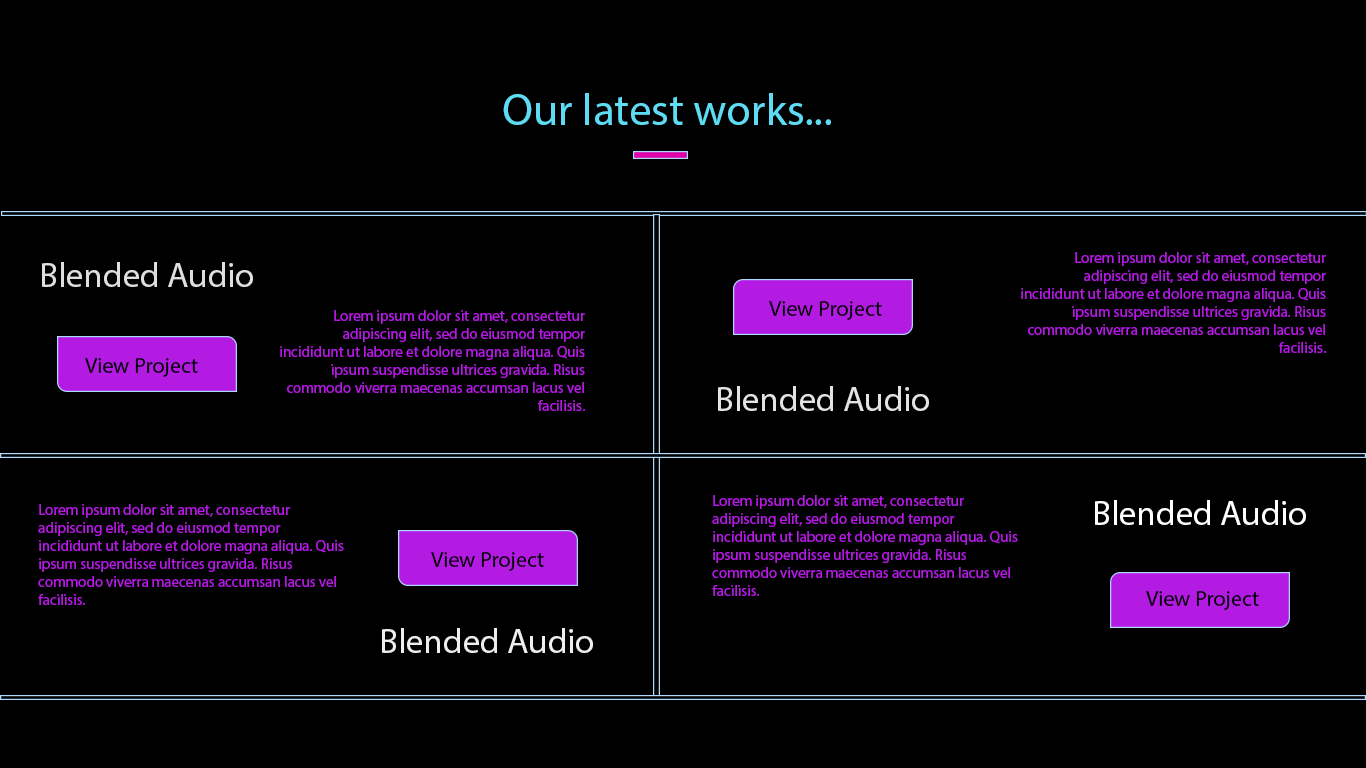
<style>
.page{position:relative;width:1366px;height:768px;background:#000000}
.page>*{position:absolute;margin:0}
.t1{font:45px "MyriadPro-Regular";color:#5ddcf3}
.t2{font:45px "MyriadPro-Regular";color:#000000}
.t3{font:15px "MyriadPro-Regular";color:#b31ae2}
.t4{font:35px "MyriadPro-Regular";color:#dfdfdf}
.t5{font:22px "MyriadPro-Regular";color:#000000}
.t6{font:35px "MyriadPro-Regular";color:#e3e3e3}
.t7{font:35px "MyriadPro-Regular";color:#ffffff}
.t8{font:35px "MyriadPro-Regular";color:#eeeeee}
</style>
<div class="page">
<p class="t1" style="left:489px;top:93px;width:342px;height:37px"><span class="t2">]</span>Our latest works...</p>
<p class="t3" style="left:1021px;top:252px;width:305px;height:101px;text-align:right">Lorem ipsum dolor sit amet, consectetur adipiscing elit, sed do eiusmod tempor incididunt ut labore et dolore magna aliqua. Quis ipsum suspendisse ultrices gravida. Risus commodo viverra maecenas accumsan lacus vel facilisis.</p>
<p class="t4" style="left:42px;top:262px;width:211px;height:25px">Blended Audio</p>
<p class="t5" style="left:769px;top:301px;width:113px;height:19px">View Project</p>
<p class="t3" style="left:280px;top:310px;width:305px;height:101px;text-align:right">Lorem ipsum dolor sit amet, consectetur adipiscing elit, sed do eiusmod tempor incididunt ut labore et dolore magna aliqua. Quis ipsum suspendisse ultrices gravida. Risus commodo viverra maecenas accumsan lacus vel facilisis.</p>
<p class="t5" style="left:85px;top:358px;width:113px;height:19px">View Project</p>
<p class="t6" style="left:718px;top:386px;width:211px;height:25px">Blended Audio</p>
<p class="t3" style="left:712px;top:495px;width:306px;height:101px">Lorem ipsum dolor sit amet, consectetur adipiscing elit, sed do eiusmod tempor incididunt ut labore et dolore magna aliqua. Quis ipsum suspendisse ultrices gravida. Risus commodo viverra maecenas accumsan lacus vel facilisis.</p>
<p class="t3" style="left:38px;top:504px;width:306px;height:101px">Lorem ipsum dolor sit amet, consectetur adipiscing elit, sed do eiusmod tempor incididunt ut labore et dolore magna aliqua. Quis ipsum suspendisse ultrices gravida. Risus commodo viverra maecenas accumsan lacus vel facilisis.</p>
<p class="t7" style="left:1095px;top:500px;width:211px;height:25px">Blended Audio</p>
<p class="t5" style="left:431px;top:552px;width:113px;height:19px">View Project</p>
<p class="t5" style="left:1146px;top:591px;width:113px;height:19px">View Project</p>
<p class="t8" style="left:382px;top:628px;width:211px;height:25px">Blended Audio</p>
</div>
